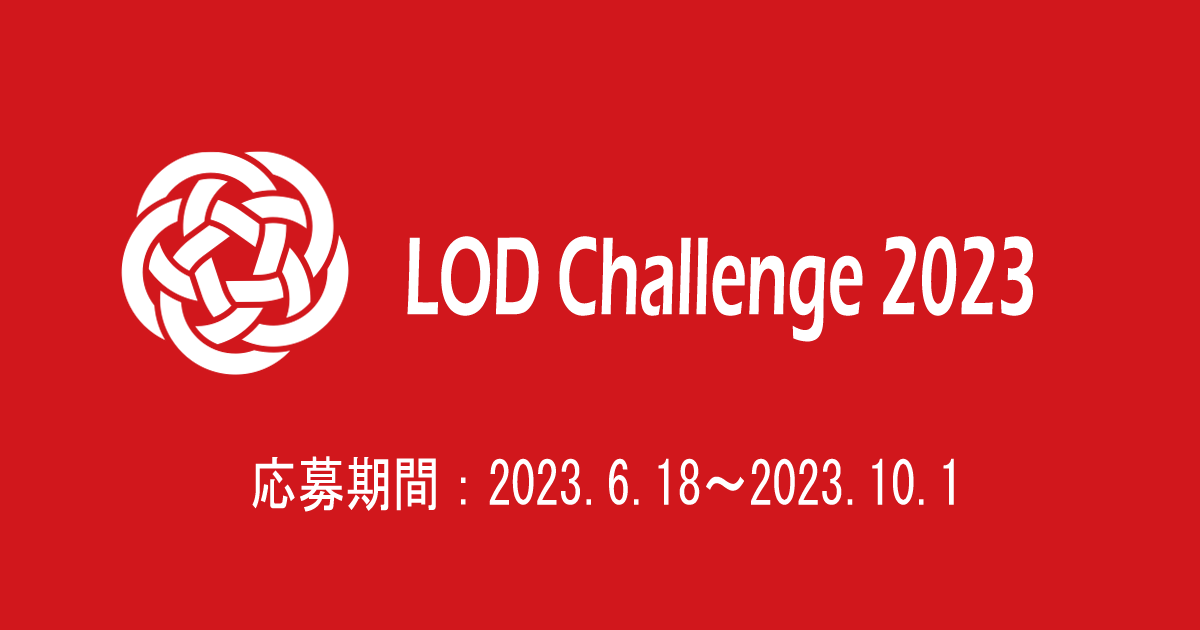
<style>
.page{position:relative;width:1200px;height:630px;background:#d1171c}
.page>*{position:absolute;margin:0}
.t1{font:114.8px "ErasITC-Demi";color:#ffffff;scale:0.56 1}
.t2{font:60px "MS-Gothic";color:#ffffff;scale:0.79 1}
</style>
<div class="page">
<p class="t1" style="left:407px;top:236px;width:626px;height:106px">LOD Challenge 2023</p>
<p class="t2" style="left:252px;top:456px;width:702px;height:56px">応募期間：2023.6.18～2023.10.1</p>
</div>
